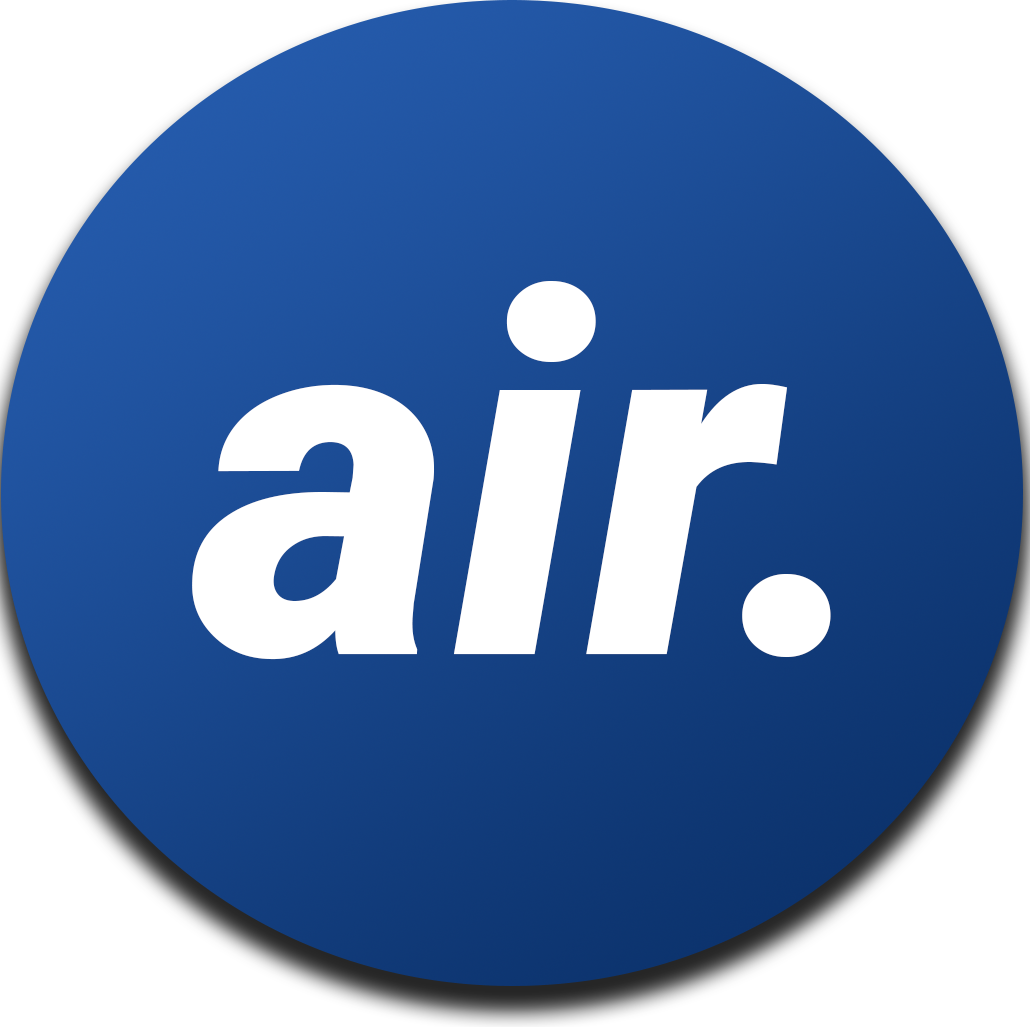
<style>
.page{position:relative;width:1030px;height:1027px;background:#ffffff}
.page>*{position:absolute;margin:0}
.t1{font:500px "Roboto-BlackItalic";color:#ffffff}
</style>
<div class="page">
<p class="t1" style="left:192px;top:281px;width:639px;height:379px">air.</p>
</div>
